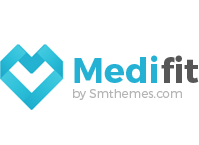
<style>
.page{position:relative;width:199px;height:145px;background:#ffffff}
.page>*{position:absolute;margin:0}
.t1{font:12px/15px "Montserrat-Light";color:#b5b5b5}
.t2{font:35px/18px "Montserrat-Bold";color:#25b1d4}
.t3{font:35px/18px "Montserrat-Bold";color:#575757}
</style>
<div class="page">
<p class="t1" style="left:73px;top:55px;width:126px;height:45px"><span class="t2">Medi</span><span class="t3">fit<br></span>by Smthemes.com</p>
</div>
